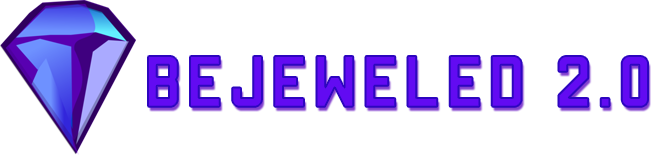
<style>
.page{position:relative;width:653px;height:155px;background:#ffffff}
.page>*{position:absolute;margin:0}
.t1{font:56px "Manteka";letter-spacing:0.1em;color:#620bf2;font-weight:bold}
</style>
<div class="page">
<p class="t1" style="left:148px;top:56px;width:500px;height:51px">BEJEWELED 2.0</p>
</div>
